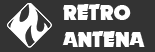
<style>
.page{position:relative;width:155px;height:52px;background:#333333}
.page>*{position:absolute;margin:0}
.t1{font:22.3px "Nougat-ExtraBlack";color:#ffffff}
</style>
<div class="page">
<p class="t1" style="left:62px;top:4px;width:83px;height:43px">RETRO<br>ANTENA</p>
</div>
